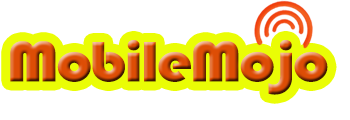
<style>
.page{position:relative;width:350px;height:120px;background:#ffffff}
.page>*{position:absolute;margin:0}
.t1{font:58.6px "Bauhaus93";letter-spacing:-0.035em;scale:1.09 1}
</style>
<div class="page">
<p class="t1" style="left:10px;top:40px;width:318px;height:55px">MobileMojo</p>
</div>
